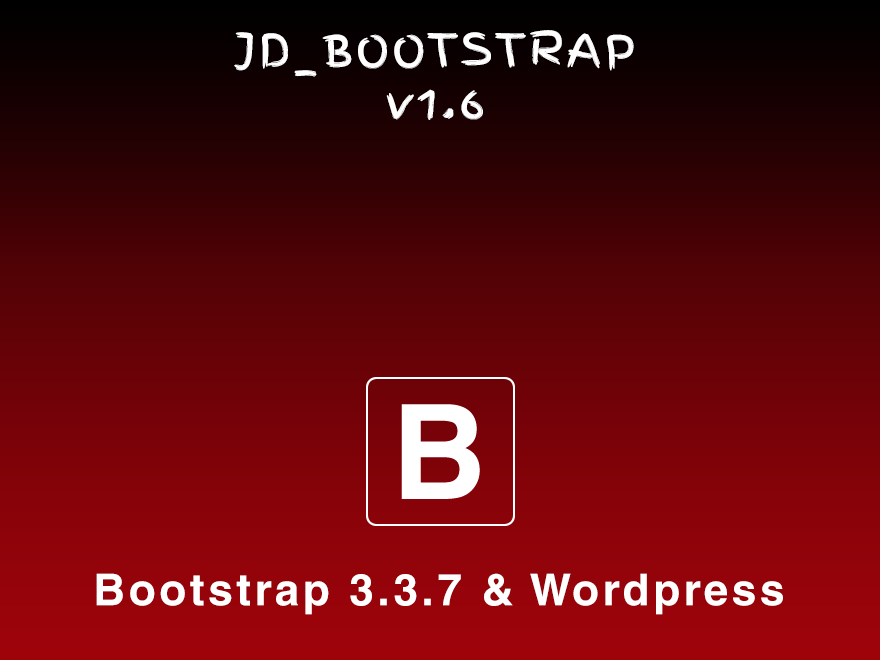
<style>
.page{position:relative;width:880px;height:660px}
.page>*{position:absolute;margin:0}
.t1{font:44px "FingerPaint-Regular";letter-spacing:0.084em;color:#ffffff}
.t2{font:44px "HelveticaLTStd-Bold";letter-spacing:0.084em;color:#ffffff}
</style>
<div class="page">
<p class="t1" style="left:234px;top:30px;width:400px;height:90px;text-align:center">JD_BOOTSTRAP<br>v1.6</p>
<p class="t2" style="left:96px;top:573px;width:687px;height:42px">Bootstrap 3.3.7 &amp; Wordpress</p>
</div>
